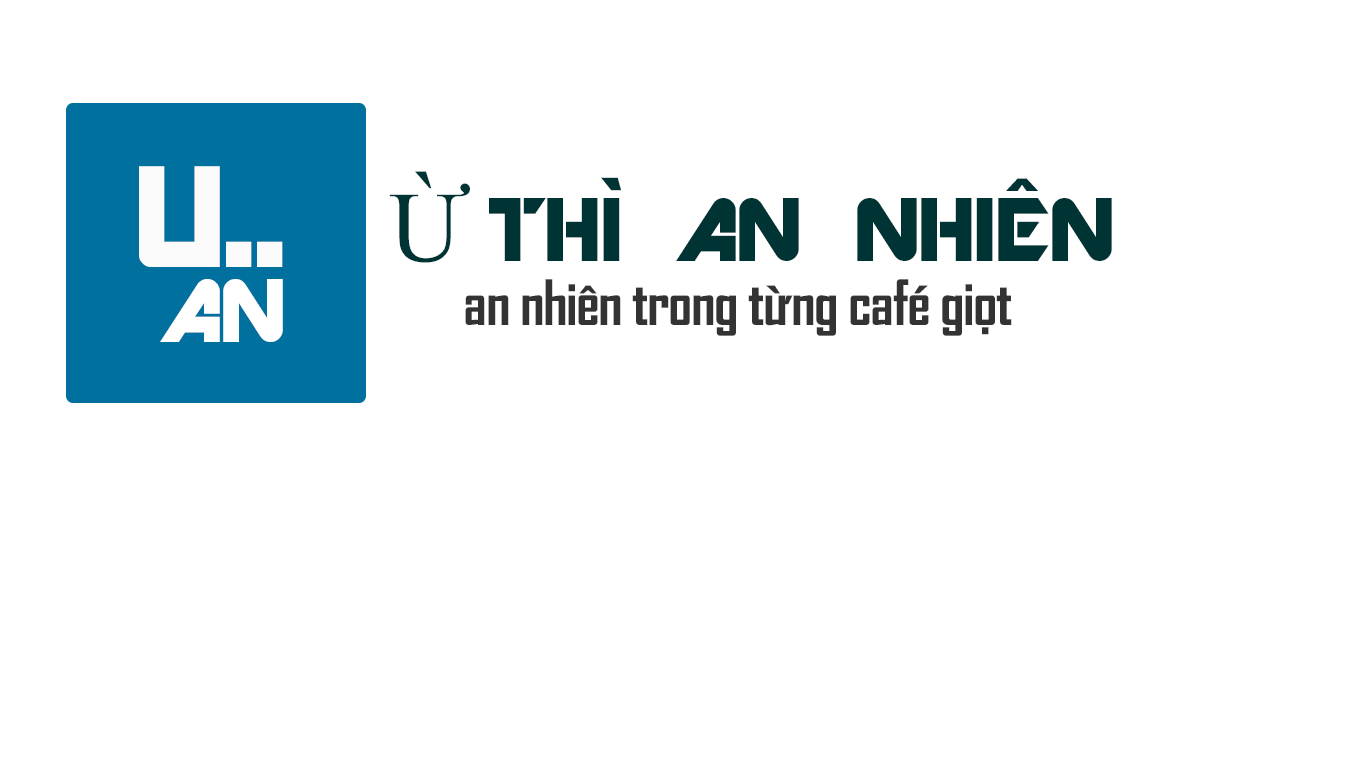
<style>
.page{position:relative;width:1366px;height:768px;background:#ffffff}
.page>*{position:absolute;margin:0}
.t1{font:160px "ARDESTINE";letter-spacing:-0.025em;color:#fcfbfb;text-transform:uppercase}
.t2{font:100px "ARDESTINE";letter-spacing:-0.025em;color:#003333;text-transform:uppercase}
.t3{font:100px "TimesNewRomanPSMT";letter-spacing:-0.025em;color:#003333;text-transform:uppercase}
.t4{font:100px "ARDESTINE";letter-spacing:-0.025em;color:#ffffff;text-transform:uppercase}
.t5{font:60px "SVN-AgencyFBbold";letter-spacing:-0.025em;color:#333333}
</style>
<div class="page">
<p class="t1" style="left:139px;top:166px;width:144px;height:101px">u..</p>
<p class="t2" style="left:389px;top:171px;width:723px;height:92px"><span class="t3">Ừ </span>THÌ AN NHIÊN</p>
<p class="t4" style="left:160px;top:279px;width:123px;height:63px">an</p>
<p class="t5" style="left:465px;top:279px;width:547px;height:57px">an nhiên trong từng café giọt</p>
</div>
